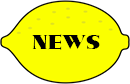
<style>
.page{position:relative;width:130px;height:84px;background:#fbff00}
.page>*{position:absolute;margin:0}
.t1{font:20px "Vogue";color:#000000}
</style>
<div class="page">
<p class="t1" style="left:32px;top:34px;width:68px;height:16px">NEWS</p>
</div>
